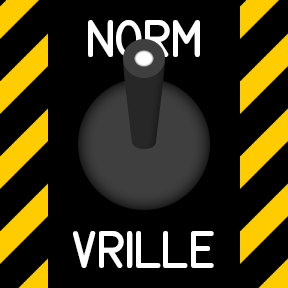
<style>
.page{position:relative;width:288px;height:288px;background:#000000}
.page>*{position:absolute;margin:0}
.t1{font:37px "MS-33558-Regular";letter-spacing:-0.04em;color:#ffffff}
</style>
<div class="page">
<p class="t1" style="left:88px;top:20px;width:112px;height:37px">NORM</p>
<p class="t1" style="left:73px;top:231px;width:141px;height:37px">VRILLE</p>
</div>
